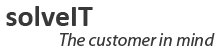
<style>
.page{position:relative;width:224px;height:54px;background:#ffffff}
.page>*{position:absolute;margin:0}
.t1{font:30px "Calibri-Bold";color:#383838}
.t2{font:18px "MyriadPro-It";color:#383838}
</style>
<div class="page">
<p class="t1" style="left:6px;top:6px;width:87px;height:20px">solveIT</p>
<p class="t2" style="left:60px;top:33px;width:155px;height:13px">The customer in mind</p>
</div>
